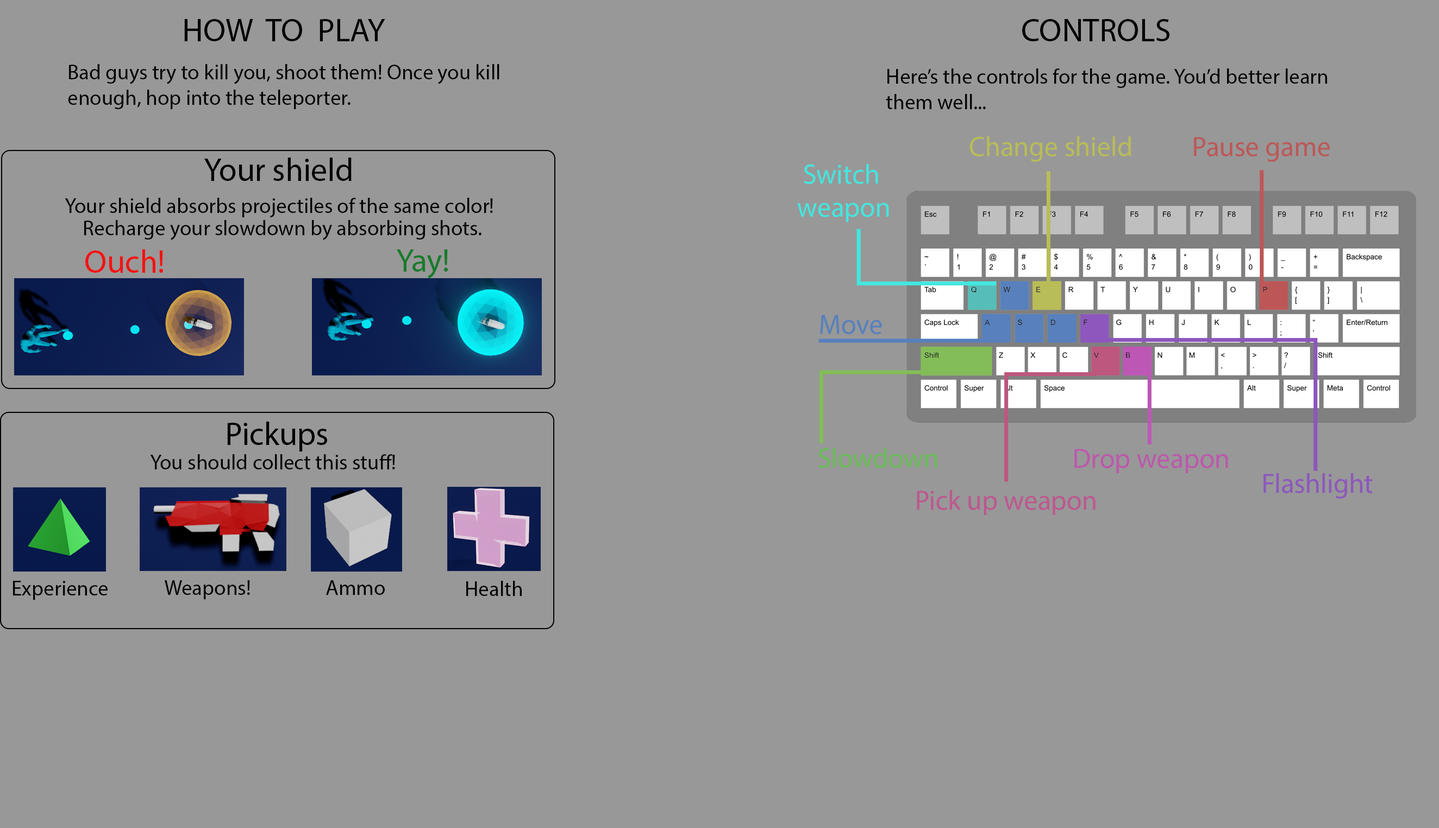
<style>
.page{position:relative;width:1439px;height:828px;background:#989898}
.page>*{position:absolute;margin:0}
.t1{font:32.6px "MyriadPro-Regular";color:#000000}
.t2{font:21.2px "MyriadPro-Regular";color:#010101}
.t3{font:21.2px "MyriadPro-Regular";color:#000000}
.t4{font:32.6px "MyriadPro-Regular";color:#f61111}
.t5{font:32.6px "MyriadPro-Regular";color:#177b2a}
</style>
<div class="page">
<p class="t1" style="left:184px;top:19px;width:201px;height:22px">HOW  TO  PLAY</p>
<p class="t1" style="left:1022px;top:19px;width:148px;height:22px">CONTROLS</p>
<p class="t2" style="left:68px;top:64px;width:432px;height:45px">Bad guys try to kill you, shoot them! Once you kill<br>enough, hop into the teleporter.</p>
<p class="t2" style="left:886px;top:68px;width:441px;height:41px">Here’s the controls for the game. You’d better learn<br>them well...</p>
<p class="t1" style="left:204px;top:158px;width:148px;height:23px">Your shield</p>
<p class="t3" style="left:65px;top:198px;width:428px;height:19px">Your shield absorbs projectiles of the same color!</p>
<p class="t3" style="left:84px;top:220px;width:398px;height:20px">Recharge your slowdown by absorbing shots.</p>
<p class="t4" style="left:85px;top:250px;width:78px;height:23px">Ouch!</p>
<p class="t5" style="left:397px;top:250px;width:51px;height:29px">Yay!</p>
<p class="t1" style="left:227px;top:422px;width:100px;height:30px">Pickups</p>
<p class="t3" style="left:150px;top:454px;width:245px;height:16px">You should collect this stuff!</p>
<p class="t3" style="left:13px;top:581px;width:95px;height:19px">Experience</p>
<p class="t3" style="left:165px;top:581px;width:85px;height:19px">Weapons!</p>
<p class="t3" style="left:326px;top:581px;width:59px;height:14px">Ammo</p>
<p class="t3" style="left:466px;top:581px;width:56px;height:15px">Health</p>
</div>
